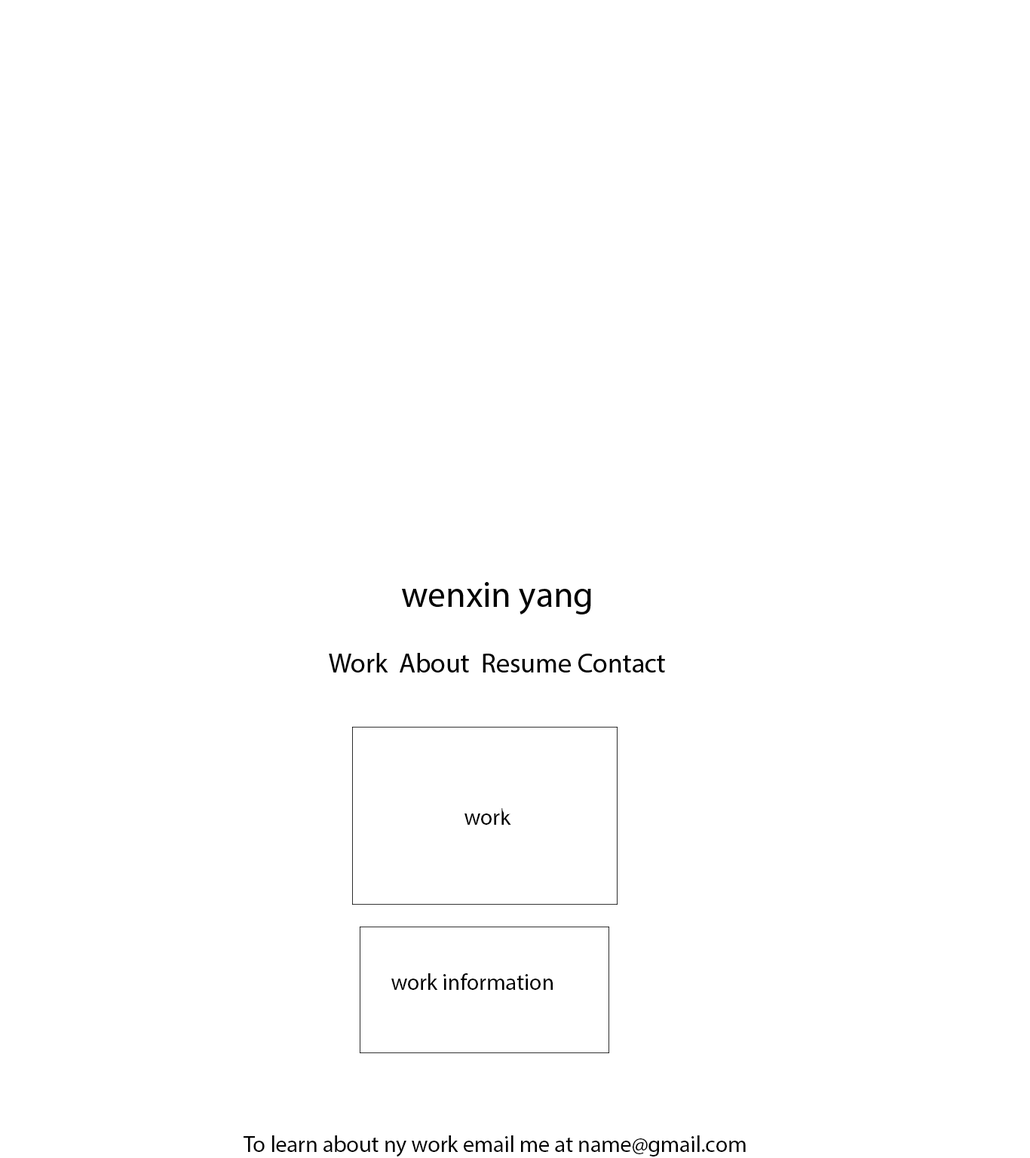
<style>
.page{position:relative;width:1030px;height:1158px;background:#ffffff}
.page>*{position:absolute;margin:0}
.t1{font:22.6px "MyriadPro-Regular";color:#000000}
</style>
<div class="page">
<p class="t1" style="left:464px;top:808px;width:47px;height:17px">work</p>
<p class="t1" style="left:391px;top:973px;width:162px;height:17px">work information</p>
<p class="t1" style="left:243px;top:1135px;width:503px;height:22px">To learn about ny work email me at name@gmail.com</p>
</div>
